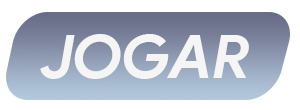
<style>
.page{position:relative;width:300px;height:110px;background:#ffffff}
.page>*{position:absolute;margin:0}
.t1{font:60px "ProductSans-BoldItalic";color:#f5f5f5}
</style>
<div class="page">
<p class="t1" style="left:40px;top:34px;width:209px;height:45px">JOGAR</p>
</div>
